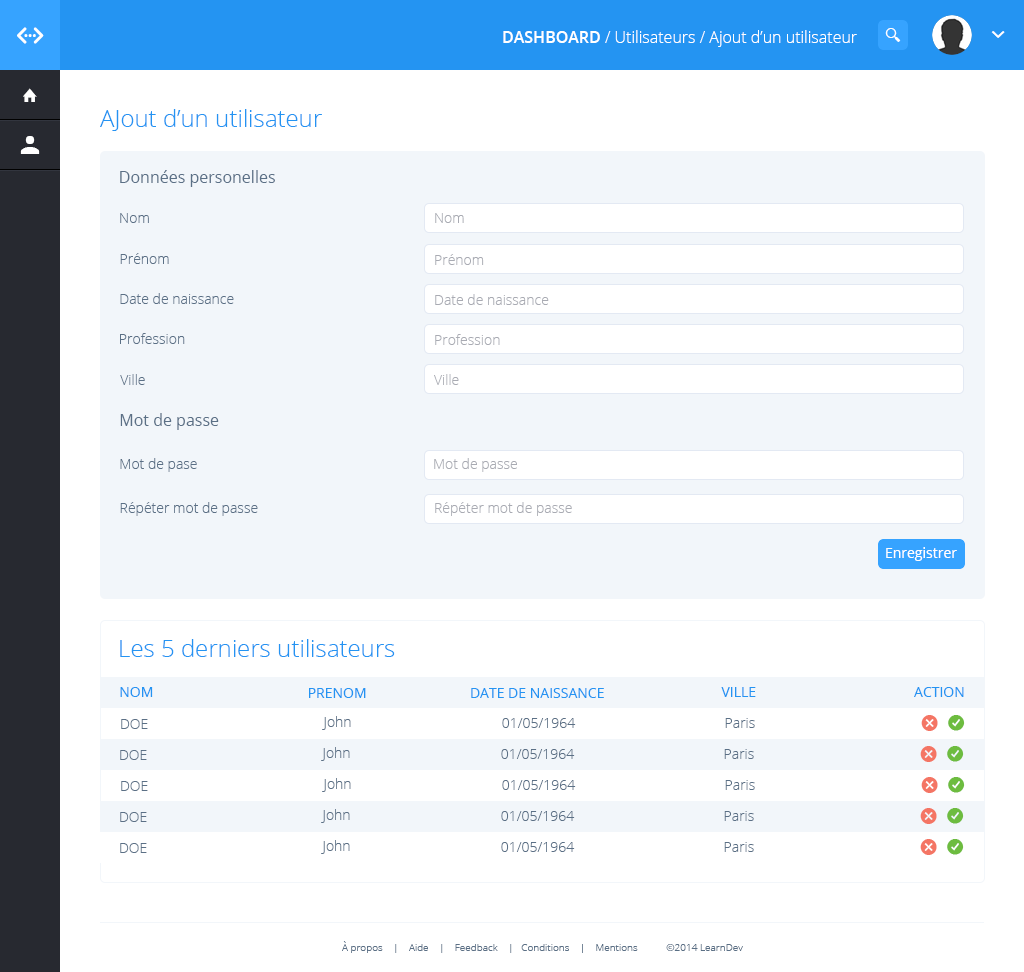
<style>
.page{position:relative;width:1024px;height:972px;background:#ffffff}
.page>*{position:absolute;margin:0}
.t1{font:16px "OpenSans-Light";color:#ffffff}
.t2{font:16px "OpenSans-Semibold";color:#ffffff}
.t3{font:24px "OpenSans-Light";color:#2494f2}
.t4{font:16px "OpenSans";color:#5b7086}
.t5{font:14px "OpenSans-Light";color:#5b7086}
.t6{font:14px "OpenSans-Light";color:#a9abb3}
.t7{font:14px "OpenSans";color:#2494f2}
.t8{font:10px "OpenSans-Light";color:#5b7086}
</style>
<div class="page">
<p class="t1" style="left:503px;top:30px;width:354px;height:17px"><span class="t2">DASHBOARD </span>/ Utilisateurs / Ajout d’un utilisateur</p>
<p class="t3" style="left:100px;top:109px;width:222px;height:22px">AJout d’un utilisateur</p>
<p class="t4" style="left:120px;top:170px;width:155px;height:17px">Données personelles</p>
<p class="t5" style="left:120px;top:213px;width:29px;height:10px">Nom</p>
<p class="t6" style="left:435px;top:213px;width:29px;height:10px">Nom</p>
<p class="t5" style="left:120px;top:253px;width:49px;height:11px">Prénom</p>
<p class="t6" style="left:435px;top:254px;width:49px;height:11px">Prénom</p>
<p class="t5" style="left:120px;top:293px;width:114px;height:11px">Date de naissance</p>
<p class="t6" style="left:435px;top:294px;width:114px;height:11px">Date de naissance</p>
<p class="t5" style="left:120px;top:333px;width:65px;height:11px">Profession</p>
<p class="t6" style="left:435px;top:334px;width:65px;height:11px">Profession</p>
<p class="t5" style="left:120px;top:374px;width:25px;height:11px">Ville</p>
<p class="t6" style="left:434px;top:374px;width:25px;height:11px">Ville</p>
<p class="t4" style="left:120px;top:413px;width:99px;height:17px">Mot de passe</p>
<p class="t5" style="left:120px;top:458px;width:77px;height:14px">Mot de pase</p>
<p class="t6" style="left:434px;top:458px;width:83px;height:14px">Mot de passe</p>
<p class="t5" style="left:120px;top:502px;width:138px;height:14px">Répéter mot de passe</p>
<p class="t6" style="left:435px;top:502px;width:137px;height:14px">Répéter mot de passe</p>
<p class="t3" style="left:120px;top:639px;width:275px;height:18px">Les 5 derniers utilisateurs</p>
<p class="t7" style="left:120px;top:687px;width:33px;height:10px">NOM</p>
<p class="t7" style="left:309px;top:688px;width:57px;height:10px">PRENOM</p>
<p class="t7" style="left:471px;top:688px;width:133px;height:10px">DATE DE NAISSANCE</p>
<p class="t7" style="left:721px;top:687px;width:35px;height:10px">VILLE</p>
<p class="t7" style="left:914px;top:687px;width:50px;height:10px">ACTION</p>
<p class="t5" style="left:121px;top:719px;width:27px;height:10px">DOE</p>
<p class="t5" style="left:322px;top:716px;width:29px;height:14px">John</p>
<p class="t5" style="left:502px;top:718px;width:74px;height:10px">01/05/1964</p>
<p class="t5" style="left:725px;top:718px;width:30px;height:10px">Paris</p>
<p class="t5" style="left:120px;top:750px;width:27px;height:10px">DOE</p>
<p class="t5" style="left:321px;top:747px;width:29px;height:14px">John</p>
<p class="t5" style="left:501px;top:749px;width:74px;height:10px">01/05/1964</p>
<p class="t5" style="left:724px;top:749px;width:30px;height:10px">Paris</p>
<p class="t5" style="left:121px;top:781px;width:27px;height:10px">DOE</p>
<p class="t5" style="left:322px;top:778px;width:29px;height:14px">John</p>
<p class="t5" style="left:502px;top:780px;width:74px;height:10px">01/05/1964</p>
<p class="t5" style="left:725px;top:780px;width:30px;height:10px">Paris</p>
<p class="t5" style="left:321px;top:809px;width:29px;height:14px">John</p>
<p class="t5" style="left:120px;top:812px;width:27px;height:10px">DOE</p>
<p class="t5" style="left:501px;top:811px;width:74px;height:10px">01/05/1964</p>
<p class="t5" style="left:724px;top:811px;width:30px;height:10px">Paris</p>
<p class="t5" style="left:120px;top:843px;width:27px;height:10px">DOE</p>
<p class="t5" style="left:321px;top:840px;width:29px;height:14px">John</p>
<p class="t5" style="left:501px;top:842px;width:74px;height:10px">01/05/1964</p>
<p class="t5" style="left:724px;top:842px;width:30px;height:10px">Paris</p>
<p class="t8" style="left:342px;top:941px;width:401px;height:12px">À propos    |    Aide    |    Feedback    |   Conditions    |    Mentions           ©2014 LearnDev</p>
</div>
